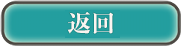
<style>
.page{position:relative;width:181px;height:46px;background:#239e9f}
.page>*{position:absolute;margin:0}
.t1{font:24px "RyuminPr6N-ExBold";color:#faf4f0}
</style>
<div class="page">
<p class="t1" style="left:67px;top:12px;width:46px;height:22px">返回</p>
</div>
